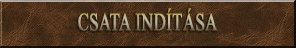
<style>
.page{position:relative;width:296px;height:48px}
.page>*{position:absolute;margin:0}
.t1{font:30px "ShonarBangla";text-transform:uppercase;font-weight:bold;scale:0.67 1}
</style>
<div class="page">
<p class="t1" style="left:78px;top:8px;width:140px;height:23px">csata indítása</p>
</div>
